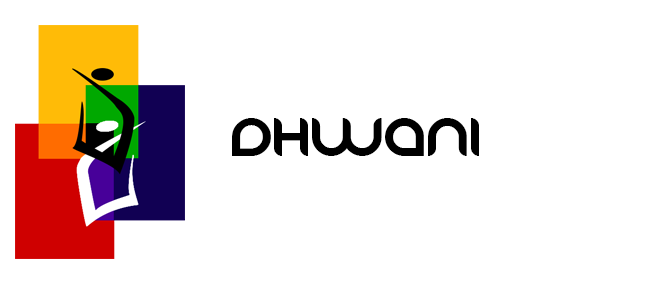
<style>
.page{position:relative;width:648px;height:282px;background:#ffffff}
.page>*{position:absolute;margin:0}
.t1{font:48px "Danube";color:#000000;text-transform:uppercase}
</style>
<div class="page">
<p class="t1" style="left:232px;top:118px;width:247px;height:38px">dhwani</p>
</div>
